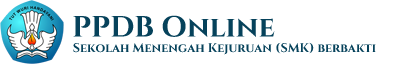
<style>
.page{position:relative;width:400px;height:64px;background:#ffffff}
.page>*{position:absolute;margin:0}
.t1{font:29.2px "Cinzel-Bold";color:#06425b}
.t2{font:12.5px "Cinzel-Bold";color:#06425b}
</style>
<div class="page">
<p class="t1" style="left:73px;top:15px;width:202px;height:22px">PPDB Online</p>
<p class="t2" style="left:73px;top:42px;width:303px;height:13px">Sekolah Menengah Kejuruan (SMK) berbakti</p>
</div>
